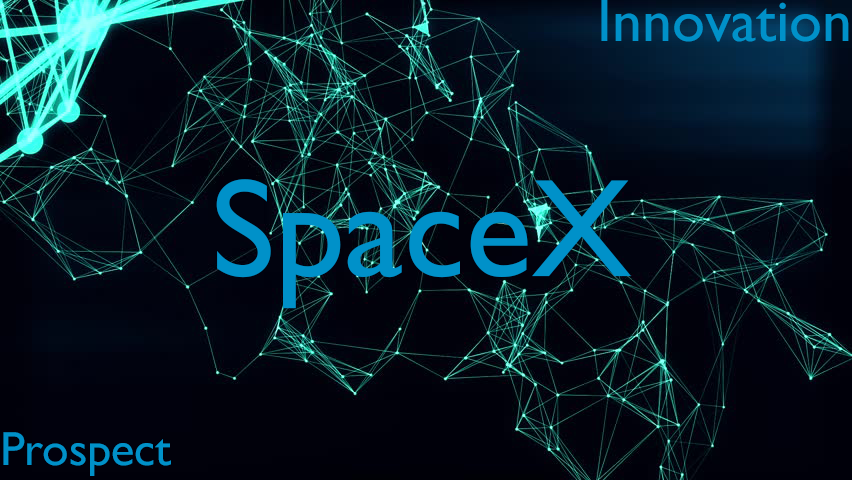
<style>
.page{position:relative;width:852px;height:480px}
.page>*{position:absolute;margin:0}
.t1{font:60px "GillSansMT";color:#0091c9}
.t2{font:140px "GillSansMT";color:#0091c9}
.t3{font:48px "GillSansMT";color:#0091c9}
</style>
<div class="page">
<p class="t1" style="left:601px;top:0px;width:248px;height:42px">Innovation</p>
<p class="t2" style="left:216px;top:179px;width:415px;height:130px">SpaceX</p>
<p class="t3" style="left:3px;top:432px;width:168px;height:44px">Prospect</p>
</div>
